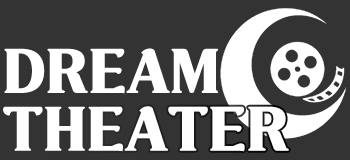
<style>
.page{position:relative;width:350px;height:160px;background:#333333}
.page>*{position:absolute;margin:0}
.t1{font:61.4px "SANGJU-Gyeongcheon-Island";letter-spacing:-0.02em;color:#ffffff}
</style>
<div class="page">
<p class="t1" style="left:4px;top:48px;width:215px;height:46px">DREAM</p>
<p class="t1" style="left:3px;top:106px;width:286px;height:46px">THEATER</p>
</div>
